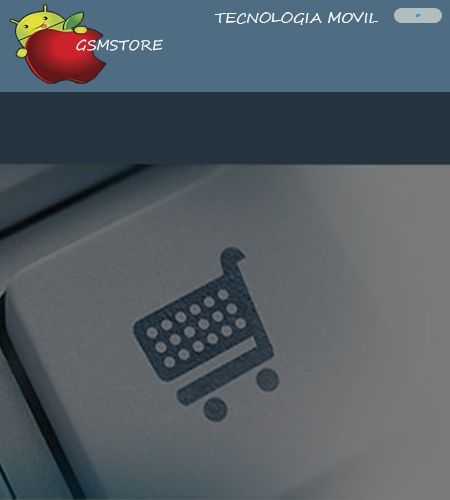
<style>
.page{position:relative;width:450px;height:500px}
.page>*{position:absolute;margin:0}
.t1{font:14px "SegoeScript";color:#fdfefe;scale:1.04 1}
.t2{font:19.1px "ForteMT";color:#3498db;scale:1.19 1}
.t3{font:14px "SegoeScript";color:#ffffff}
</style>
<div class="page">
<p class="t1" style="left:214px;top:12px;width:164px;height:13px">TECNOLOGIA MOVIL</p>
<p class="t2" style="left:415px;top:14px;width:6px;height:3px">-</p>
<p class="t3" style="left:76px;top:39px;width:87px;height:13px">GSMSTORE</p>
</div>
